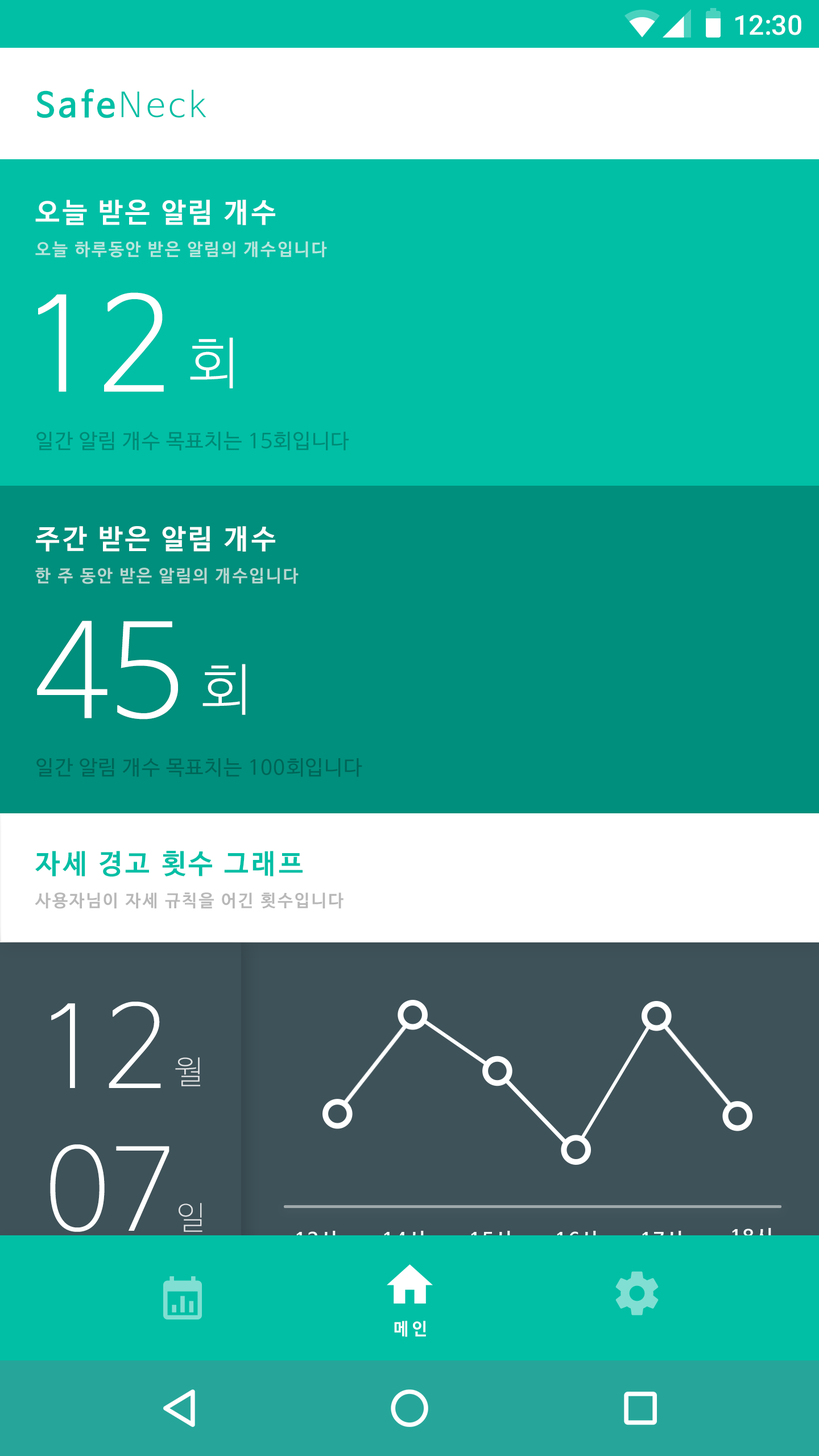
<style>
.page{position:relative;width:819px;height:1456px;background:#00bfa5}
.page>*{position:absolute;margin:0}
.t1{font:27.3px "Roboto-Medium";color:#ffffff}
.t2{font:34.1px "NanumBarunGothicBold";letter-spacing:0.1em;color:#00bfa5}
.t3{font:34.1px "NanumBarunGothicLight";letter-spacing:0.1em;color:#00bfa5}
.t4{font:27.3px "NanumBarunGothicBold";letter-spacing:0.1em;color:#ffffff}
.t5{font:17.1px "NanumBarunGothicBold";letter-spacing:0.1em;color:#b7e6dd}
.t6{font:129.1px "NanumBarunGothicLight";color:#ffffff}
.t7{font:55.7px "NanumBarunGothicLight";color:#ffffff}
.t8{font:20.5px "NanumBarunGothic";letter-spacing:0.04em;color:#008975}
.t9{font:17.1px "NanumBarunGothicBold";letter-spacing:0.1em;color:#b7d6d0}
.t10{font:20.5px "NanumBarunGothic";letter-spacing:0.04em;color:#006557}
.t11{font:27.3px "NanumBarunGothicBold";letter-spacing:0.1em;color:#00bfa5}
.t12{font:17.1px "NanumBarunGothicBold";letter-spacing:0.1em;color:#b8b8b8}
.t13{font:113.4px "NanumBarunGothicUltraLight";color:#ffffff}
.t14{font:31.9px "NanumBarunGothicUltraLight";letter-spacing:0.1em;color:#e1e3e4}
.t15{font:18.8px "NanumBarunGothicBold";letter-spacing:0.1em}
.t16{font:18.8px "NanumBarunGothicBold";letter-spacing:0.1em;color:#00bfa5}
.t17{font:17px "NanumBarunGothicBold";letter-spacing:0.2em;color:#fffefe}
</style>
<div class="page">
<p class="t1" style="left:735px;top:15px;width:66px;height:20px">12:30</p>
<p class="t2" style="left:37px;top:89px;width:169px;height:29px">Safe<span class="t3">Neck</span></p>
<p class="t4" style="left:35px;top:200px;width:240px;height:25px">오늘 받은 알림 개수</p>
<p class="t5" style="left:35px;top:241px;width:292px;height:17px">오늘 하루동안 받은 알림의 개수입니다</p>
<p class="t6" style="left:38px;top:292px;width:126px;height:100px">12</p>
<p class="t7" style="left:190px;top:337px;width:43px;height:51px">회</p>
<p class="t8" style="left:36px;top:432px;width:313px;height:18px">일간 알림 개수 목표치는 15회입니다</p>
<p class="t4" style="left:36px;top:526px;width:239px;height:26px">주간 받은 알림 개수</p>
<p class="t9" style="left:35px;top:568px;width:264px;height:16px">한 주 동안 받은 알림의 개수입니다</p>
<p class="t6" style="left:37px;top:620px;width:141px;height:99px">45</p>
<p class="t7" style="left:202px;top:664px;width:44px;height:51px">회</p>
<p class="t10" style="left:36px;top:758px;width:326px;height:19px">일간 알림 개수 목표치는 100회입니다</p>
<p class="t11" style="left:35px;top:851px;width:268px;height:26px">자세 경고 횟수 그래프</p>
<p class="t12" style="left:35px;top:892px;width:309px;height:17px">사용자님이 자세 규칙을 어긴 횟수입니다</p>
<p class="t13" style="left:51px;top:1002px;width:110px;height:86px">12</p>
<p class="t14" style="left:175px;top:1057px;width:25px;height:29px">월</p>
<p class="t13" style="left:50px;top:1144px;width:119px;height:88px">07</p>
<p class="t14" style="left:179px;top:1203px;width:23px;height:29px">일</p>
<p class="t15" style="left:732px;top:1228px;width:39px;height:18px">18시</p>
<p class="t16" style="left:296px;top:1231px;width:40px;height:17px">13시</p>
<p class="t16" style="left:384px;top:1231px;width:40px;height:17px">14시</p>
<p class="t16" style="left:471px;top:1231px;width:39px;height:17px">15시</p>
<p class="t16" style="left:557px;top:1231px;width:39px;height:17px">16시</p>
<p class="t15" style="left:642px;top:1231px;width:39px;height:17px">17시</p>
<p class="t17" style="left:394px;top:1321px;width:32px;height:16px">메인</p>
</div>
